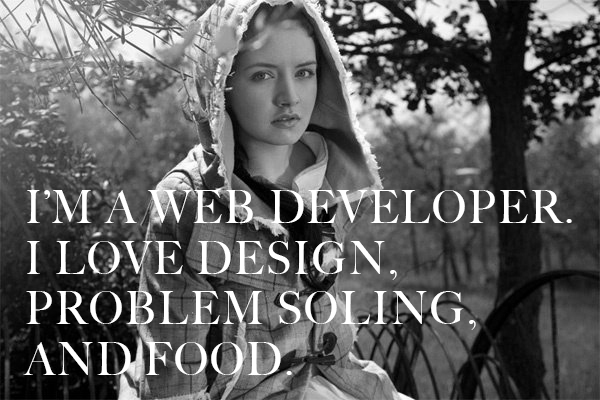
<style>
.page{position:relative;width:600px;height:400px}
.page>*{position:absolute;margin:0}
.t1{font:46.2px "BigCaslon-Medium";letter-spacing:0.05em;color:#ffffff;scale:0.91 1}
</style>
<div class="page">
<p class="t1" style="left:23px;top:190px;width:549px;height:185px">I’M A WEB DEVELOPER.<br>I LOVE DESIGN,<br>PROBLEM SOLING,<br>AND FOOD.</p>
</div>
